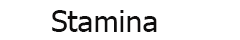
<style>
.page{position:relative;width:240px;height:40px;background:#ffffff}
.page>*{position:absolute;margin:0}
.t1{font:30px "Tahoma";color:#0f0e0e}
</style>
<div class="page">
<p class="t1" style="left:52px;top:10px;width:105px;height:22px">Stamina</p>
</div>
